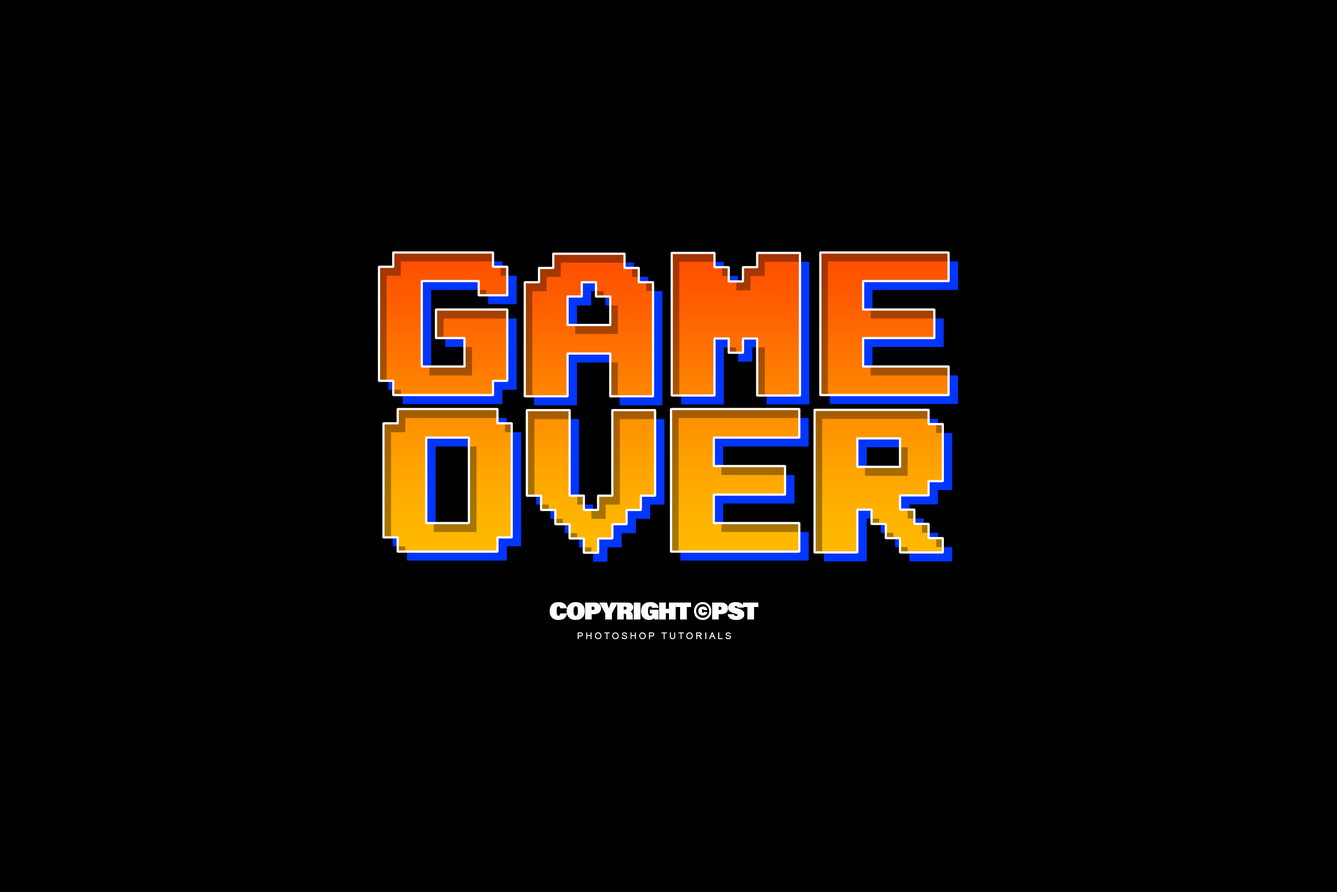
<style>
.page{position:relative;width:1337px;height:892px;background:#000000}
.page>*{position:absolute;margin:0}
.t1{font:202.8px/156.5px "AutomBold"}
.t2{font:24.2px "AcuminPro-UltraBlack";letter-spacing:-0.06em;color:#ffffff}
.t3{font:9.6px "ArialMT";letter-spacing:0.22em;color:#ffffff}
</style>
<div class="page">
<p class="t1" style="left:379px;top:252px;width:570px;height:301px;text-align:center">GAME<br>OVER</p>
<p class="t1" style="left:388px;top:261px;width:570px;height:301px;text-align:center">GAME<br>OVER</p>
<p class="t2" style="left:550px;top:602px;width:209px;height:18px">COPYRIGHT ©PST</p>
<p class="t3" style="left:578px;top:632px;width:153px;height:7px">PHOTOSHOP TUTORIALS</p>
</div>
